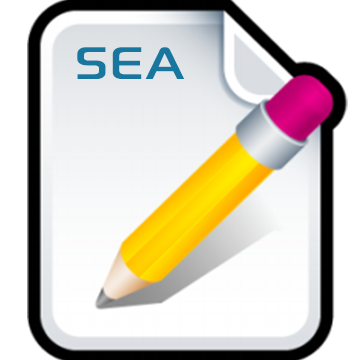
<style>
.page{position:relative;width:360px;height:360px;background:#ffffff}
.page>*{position:absolute;margin:0}
.t1{font:65px "SonySketchEF";color:#17779f}
</style>
<div class="page">
<p class="t1" style="left:77px;top:47px;width:108px;height:32px">SEA</p>
</div>
